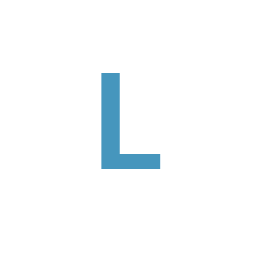
<style>
.page{position:relative;width:256px;height:256px;background:#ffffff}
.page>*{position:absolute;margin:0}
.t1{font:150px "Consolas-Bold";color:#4696bd}
</style>
<div class="page">
<p class="t1" style="left:101px;top:73px;width:60px;height:96px">L</p>
</div>
